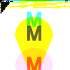
<style>
.page{position:relative;width:70px;height:70px;background:#ffffff}
.page>*{position:absolute;margin:0}
.t1{font:18.7px "NanumBarunGothicBold";font-weight:bold}
</style>
<div class="page">
<p class="t1" style="left:27px;top:10px;width:15px;height:16px">M</p>
</div>
